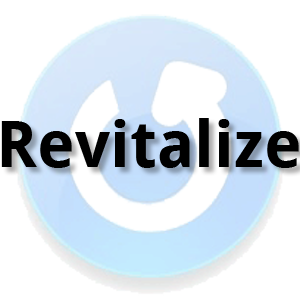
<style>
.page{position:relative;width:300px;height:300px;background:#ffffff}
.page>*{position:absolute;margin:0}
.t1{font:112px "DroidSans-Bold";color:#000000}
</style>
<div class="page">
<p class="t1" style="left:1px;top:118px;width:298px;height:50px">Revitalize</p>
</div>
